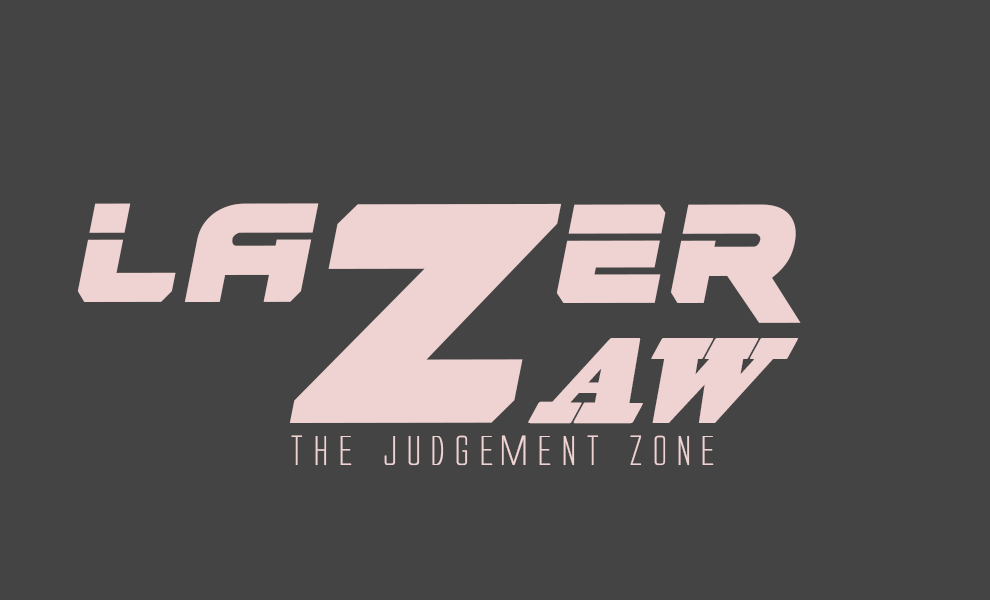
<style>
.page{position:relative;width:990px;height:600px;background:#444444}
.page>*{position:absolute;margin:0}
.t1{font:158px "Renegado";letter-spacing:0.03em;color:#efd2d2;scale:0.97 1}
.t2{font:351.4px "Renegado";letter-spacing:0.06em;color:#efd2d2;scale:0.97 1}
.t3{font:184.6px "BlackoakStd";letter-spacing:0.06em;color:#efd2d2;font-variant:small-caps;scale:0.45 1}
.t4{font:38.7px "AlienLeague";letter-spacing:0.06em;color:#efd2d2;scale:1.21 1}
</style>
<div class="page">
<p class="t1" style="left:77px;top:203px;width:242px;height:99px">LA</p>
<p class="t2" style="left:289px;top:203px;width:273px;height:220px">z</p>
<p class="t1" style="left:556px;top:204px;width:245px;height:119px">er</p>
<p class="t3" style="left:528px;top:338px;width:270px;height:86px">aw</p>
<p class="t4" style="left:291px;top:435px;width:423px;height:31px">THE JUDGEMENT ZONE</p>
</div>
